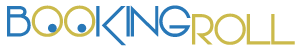
<style>
.page{position:relative;width:300px;height:50px;background:#ffffff}
.page>*{position:absolute;margin:0}
.t1{font:42px "Vonique64-Bold";letter-spacing:-0.004em;color:#2878b8}
.t2{font:42px "Vonique64-Bold";letter-spacing:-0.004em;color:#cbba4b}
.t3{font:77px "Vonique64-Bold";letter-spacing:-0.004em;color:#2878b8}
</style>
<div class="page">
<p class="t1" style="left:7px;top:5px;width:184px;height:41px">B<span class="t2">OO</span>KING</p>
<p class="t2" style="left:192px;top:13px;width:103px;height:32px">ROLL</p>
<p class="t3" style="left:48px;top:23px;width:39px;height:10px">. .</p>
</div>
